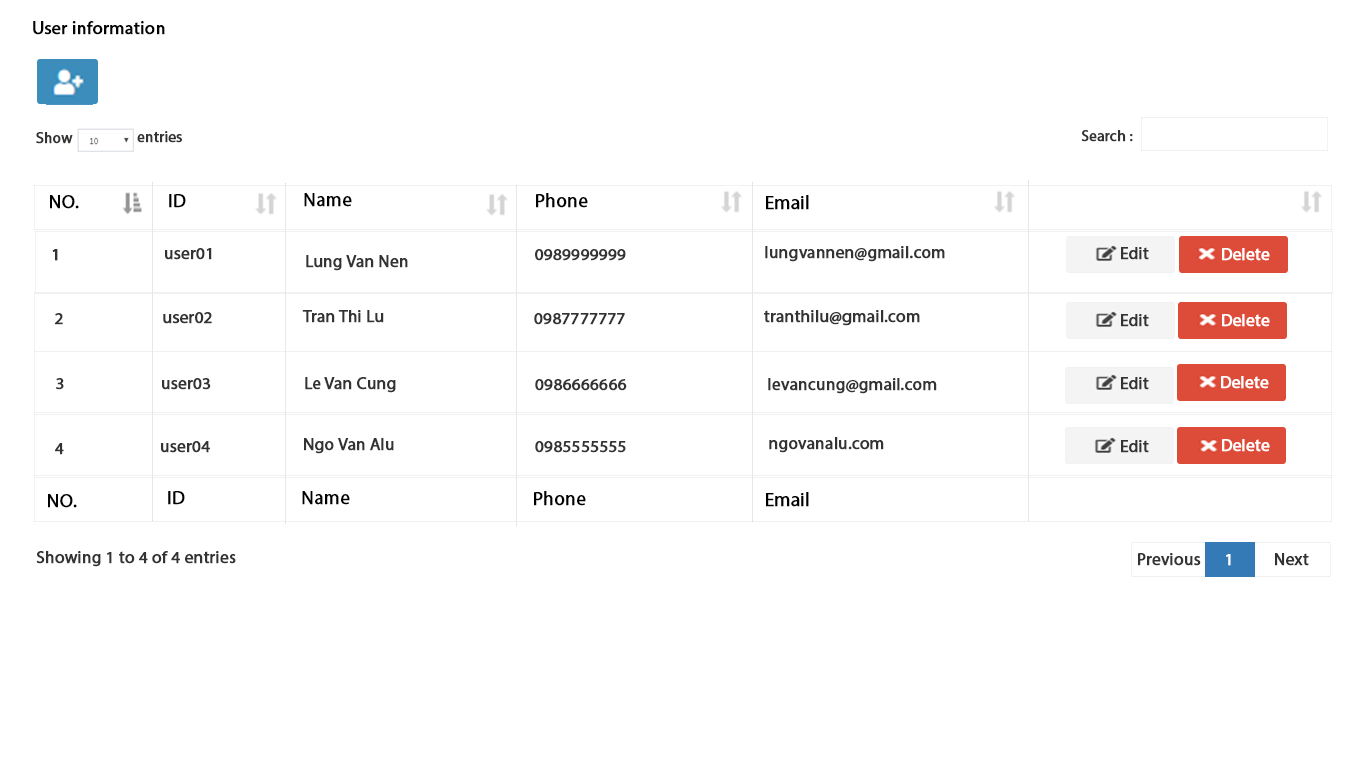
<style>
.page{position:relative;width:1366px;height:768px;background:#ffffff}
.page>*{position:absolute;margin:0}
.t1{font:18px "MyriadPro-Regular";color:#050505;font-weight:bold}
.t2{font:15px "MyriadPro-Regular";color:#333333;font-weight:bold}
.t3{font:15px/30px "MyriadPro-Regular";color:#333333;font-weight:bold}
.t4{font:19px "MyriadPro-Regular";color:#000000;font-weight:bold}
.t5{font:17px "MyriadPro-Regular";color:#333333;font-weight:bold}
.t6{font:17px "MyriadPro-Regular";color:#ffffff;font-weight:bold}
</style>
<div class="page">
<p class="t1" style="left:33px;top:21px;width:132px;height:14px">User information</p>
<p class="t2" style="left:36px;top:132px;width:37px;height:12px">Show</p>
<p class="t2" style="left:137px;top:131px;width:45px;height:12px">entries</p>
<p class="t3" style="left:1081px;top:130px;width:52px;height:12px">Search :<br>:</p>
<p class="t4" style="left:50px;top:195px;width:29px;height:14px">NO.</p>
<p class="t4" style="left:169px;top:194px;width:17px;height:14px">ID</p>
<p class="t4" style="left:304px;top:193px;width:48px;height:14px">Name</p>
<p class="t4" style="left:536px;top:193px;width:52px;height:15px">Phone</p>
<p class="t4" style="left:766px;top:195px;width:43px;height:15px">Email</p>
<p class="t5" style="left:765px;top:246px;width:180px;height:16px">lungvannen@gmail.com</p>
<p class="t5" style="left:52px;top:249px;width:6px;height:12px">1</p>
<p class="t5" style="left:52px;top:249px;width:6px;height:12px">1</p>
<p class="t5" style="left:165px;top:248px;width:47px;height:12px">user01</p>
<p class="t5" style="left:306px;top:255px;width:102px;height:16px">Lung Van Nen</p>
<p class="t5" style="left:535px;top:249px;width:91px;height:12px">0989999999</p>
<p class="t5" style="left:1121px;top:247px;width:28px;height:13px">Edit</p>
<p class="t6" style="left:1222px;top:248px;width:48px;height:13px">Delete</p>
<p class="t6" style="left:1222px;top:248px;width:48px;height:13px">Delete</p>
<p class="t5" style="left:55px;top:313px;width:8px;height:12px">2</p>
<p class="t5" style="left:163px;top:312px;width:49px;height:12px">user02</p>
<p class="t5" style="left:302px;top:310px;width:82px;height:13px">Tran Thi Lu</p>
<p class="t5" style="left:534px;top:313px;width:91px;height:12px">0987777777</p>
<p class="t5" style="left:764px;top:310px;width:156px;height:16px">tranthilu@gmail.com</p>
<p class="t5" style="left:1121px;top:314px;width:28px;height:13px">Edit</p>
<p class="t6" style="left:1222px;top:314px;width:48px;height:13px">Delete</p>
<p class="t5" style="left:305px;top:377px;width:91px;height:16px">Le Van Cung</p>
<p class="t5" style="left:1121px;top:377px;width:28px;height:13px">Edit</p>
<p class="t6" style="left:1221px;top:376px;width:48px;height:13px">Delete</p>
<p class="t5" style="left:55px;top:378px;width:9px;height:12px">3</p>
<p class="t5" style="left:162px;top:378px;width:49px;height:12px">user03</p>
<p class="t5" style="left:535px;top:379px;width:92px;height:12px">0986666666</p>
<p class="t5" style="left:768px;top:378px;width:169px;height:16px">levancung@gmail.com</p>
<p class="t5" style="left:304px;top:438px;width:90px;height:16px">Ngo Van Alu</p>
<p class="t5" style="left:769px;top:437px;width:115px;height:16px">ngovanalu.com</p>
<p class="t5" style="left:55px;top:443px;width:9px;height:12px">4</p>
<p class="t5" style="left:161px;top:441px;width:49px;height:12px">user04</p>
<p class="t5" style="left:535px;top:441px;width:91px;height:12px">0985555555</p>
<p class="t5" style="left:1121px;top:440px;width:28px;height:13px">Edit</p>
<p class="t6" style="left:1222px;top:439px;width:48px;height:13px">Delete</p>
<p class="t4" style="left:48px;top:494px;width:29px;height:14px">NO.</p>
<p class="t4" style="left:168px;top:491px;width:17px;height:14px">ID</p>
<p class="t4" style="left:302px;top:491px;width:48px;height:14px">Name</p>
<p class="t4" style="left:534px;top:491px;width:52px;height:15px">Phone</p>
<p class="t4" style="left:766px;top:492px;width:43px;height:15px">Email</p>
<p class="t5" style="left:36px;top:551px;width:200px;height:16px">Showing 1 to 4 of 4 entries</p>
<p class="t5" style="left:1138px;top:553px;width:63px;height:13px">Previous</p>
<p class="t6" style="left:1226px;top:554px;width:5px;height:12px">1</p>
<p class="t5" style="left:1275px;top:553px;width:34px;height:13px">Next</p>
</div>
